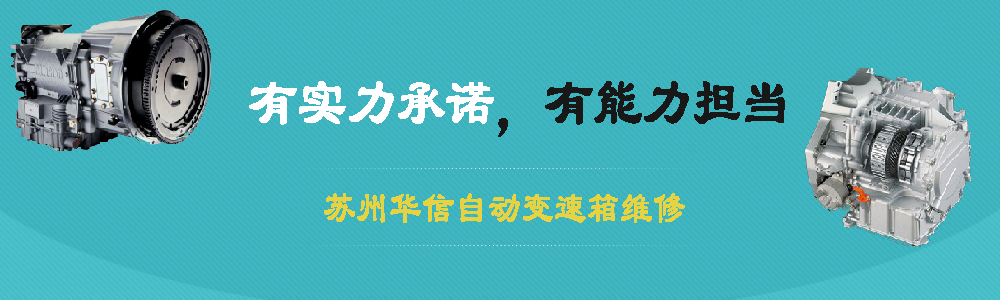
<style>
.page{position:relative;width:1000px;height:300px}
.page>*{position:absolute;margin:0}
.t1{font:67.2px "LiSu";color:#191818;font-weight:bold;scale:0.71 1}
.t2{font:67.2px "LiSu";color:#ffffff;font-weight:bold;scale:0.71 1}
.t3{font:44.8px "LiSu";color:#e7d242;font-weight:bold;scale:0.71 1}
</style>
<div class="page">
<p class="t1" style="left:249px;top:81px;width:536px;height:56px"><span class="t2">有实力承诺</span>，有能力担当</p>
<p class="t3" style="left:324px;top:193px;width:361px;height:30px">苏州华信自动变速箱维修</p>
</div>
